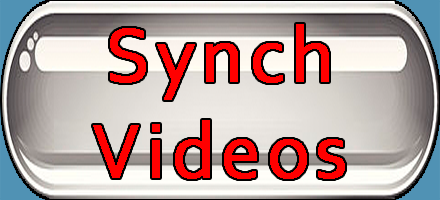
<style>
.page{position:relative;width:440px;height:200px}
.page>*{position:absolute;margin:0}
.t1{font:80px "Corbel";letter-spacing:0.05em;color:#ff0000;font-weight:bold}
</style>
<div class="page">
<p class="t1" style="left:93px;top:24px;width:252px;height:155px;text-align:center">Synch<br>Videos</p>
</div>
